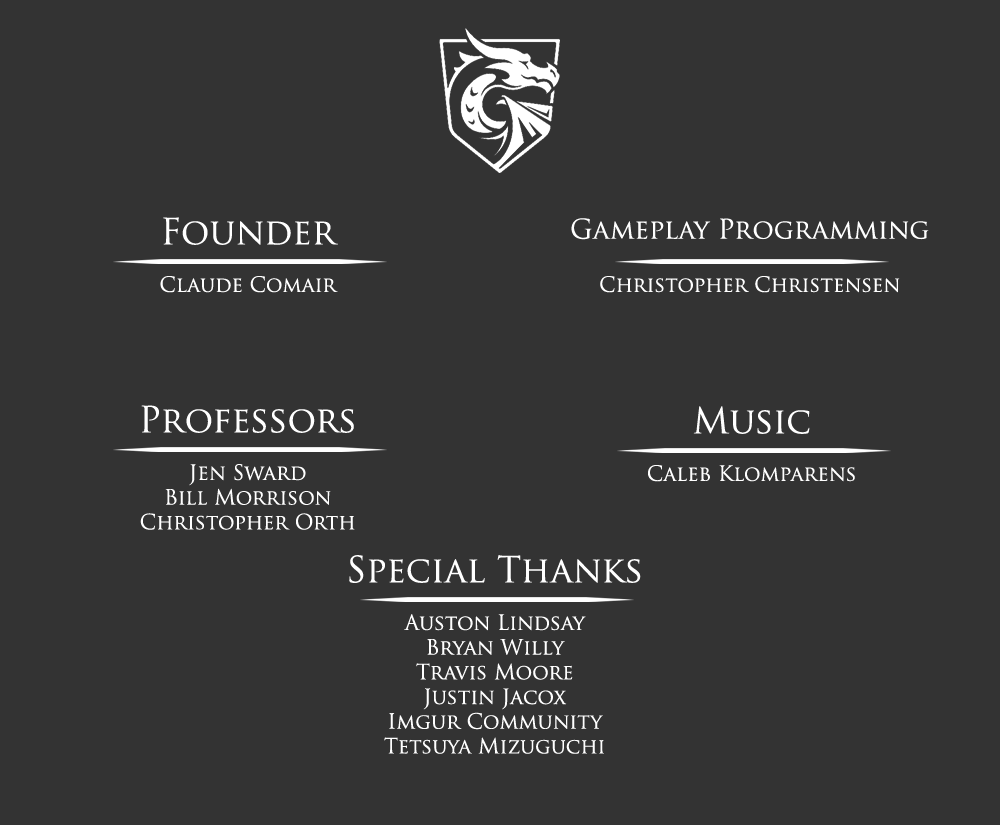
<style>
.page{position:relative;width:1000px;height:825px;background:#333333}
.page>*{position:absolute;margin:0}
.t1{font:26.5px "TrajanPro-Regular";color:#ffffff}
.t2{font:20.6px "TrajanPro-Regular";color:#ffffff}
.t3{font:35.3px "TrajanPro-Regular";color:#ffffff}
</style>
<div class="page">
<p class="t1" style="left:571px;top:218px;width:358px;height:22px">Gameplay Programming</p>
<p class="t2" style="left:600px;top:276px;width:300px;height:17px">Christopher Christensen</p>
<p class="t3" style="left:693px;top:406px;width:117px;height:28px">Music</p>
<p class="t2" style="left:648px;top:465px;width:207px;height:17px">Caleb Klomparens</p>
<p class="t3" style="left:349px;top:555px;width:292px;height:28px">Special Thanks</p>
<p class="t2" style="left:384px;top:614px;width:220px;height:140px;text-align:center">Auston Lindsay<br>Bryan Willy<br>Travis Moore<br>Justin Jacox<br>Imgur Community<br>Tetsuya Mizuguchi</p>
</div>
